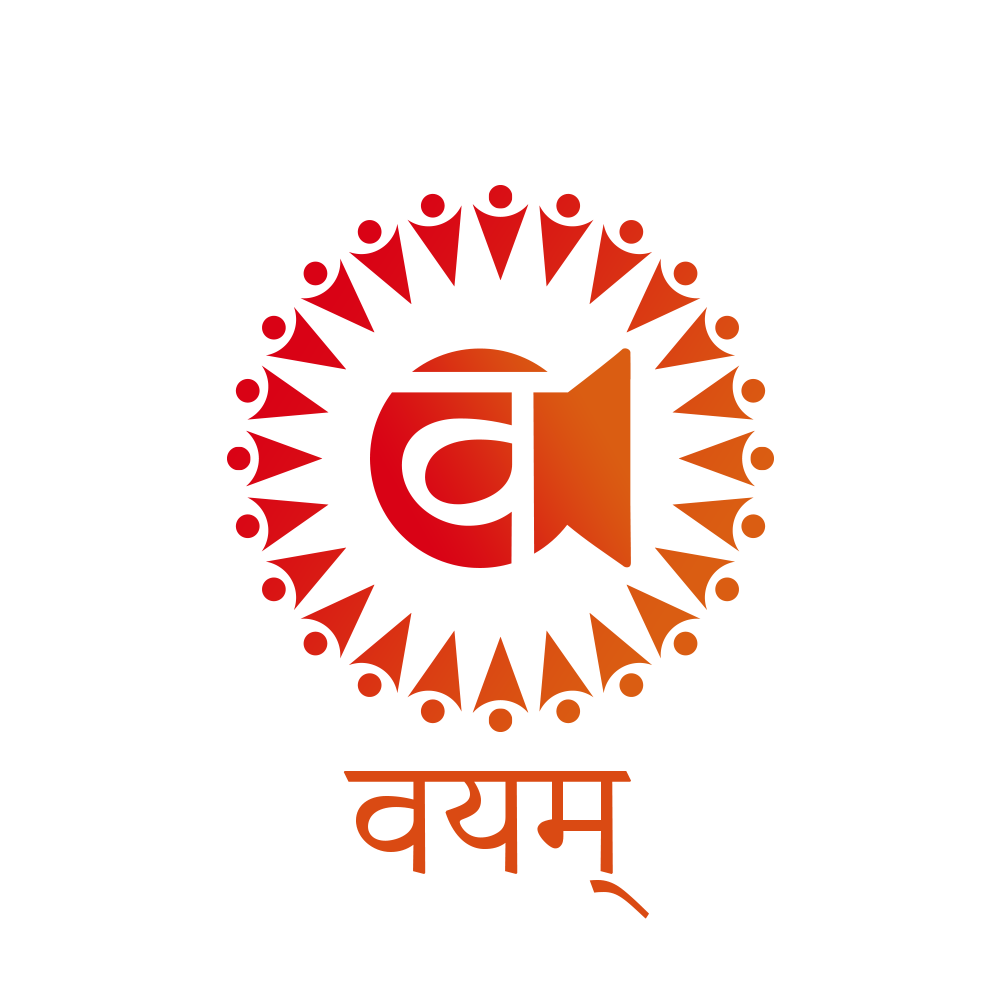
<style>
.page{position:relative;width:1000px;height:1000px;background:#ffffff}
.page>*{position:absolute;margin:0}
.t1{font:203.1px "AdobeDevanagari-Regular";color:#da4a13;text-transform:uppercase}
</style>
<div class="page">
<p class="t1" style="left:343px;top:771px;width:306px;height:148px">वयम्</p>
</div>
